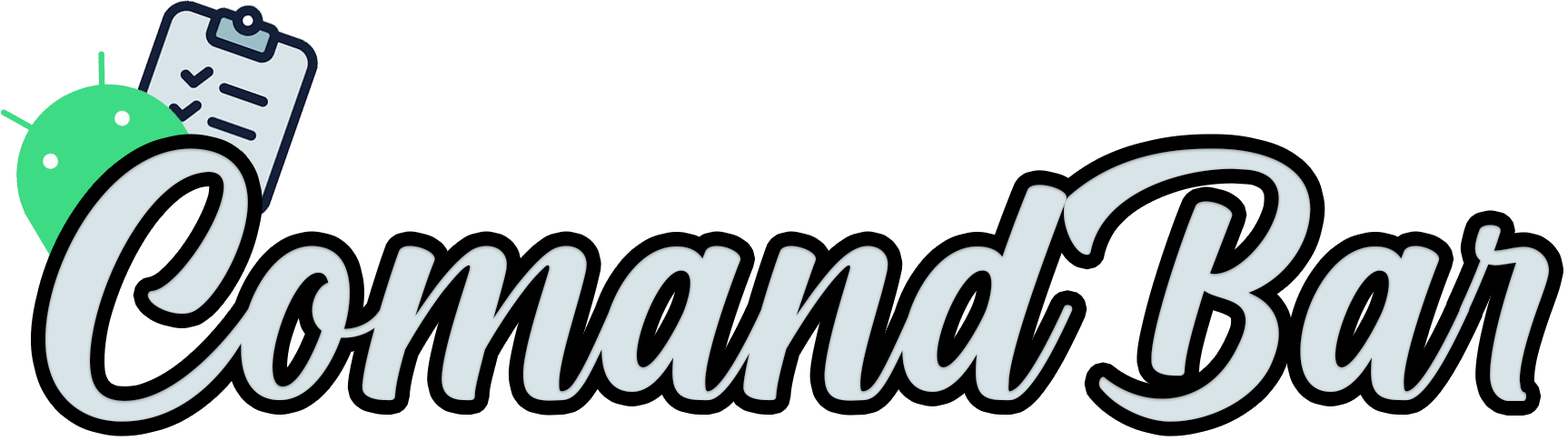
<style>
.page{position:relative;width:1568px;height:441px;background:#ffffff}
.page>*{position:absolute;margin:0}
.t1{font:436.1px "CreamCake";color:#d9e4e8}
</style>
<div class="page">
<p class="t1" style="left:45px;top:148px;width:1504px;height:274px">ComandBar</p>
</div>
